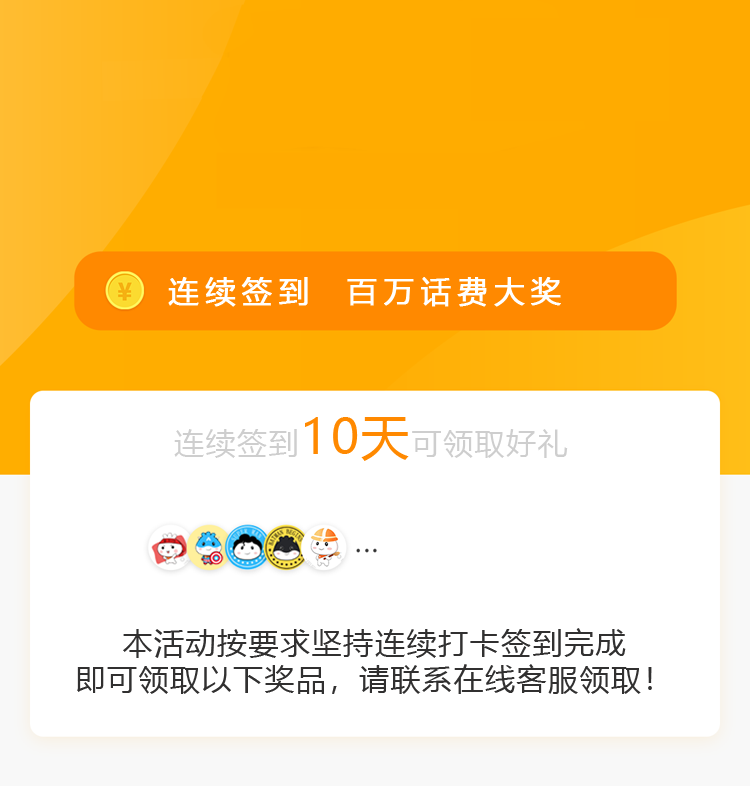
<style>
.page{position:relative;width:750px;height:786px;background:#ffffff}
.page>*{position:absolute;margin:0}
.t1{font:30px "MicrosoftYaHei";letter-spacing:0.2em;color:#ffffff;font-weight:bold}
.t2{font:30px "MicrosoftYaHei";letter-spacing:0.05em;color:#cecece}
.t3{font:48px "MicrosoftYaHei";letter-spacing:0.05em;color:#ff8900}
.t4{font:30px/36px "MicrosoftYaHei";letter-spacing:0.05em;color:#313030}
</style>
<div class="page">
<p class="t1" style="left:168px;top:277px;width:393px;height:30px">连续签到  百万话费大奖</p>
<p class="t2" style="left:174px;top:417px;width:394px;height:44px">连续签到<span class="t3">10天</span>可领取好礼</p>
<p class="t4" style="left:77px;top:628px;width:575px;height:66px;text-align:center">本活动按要求坚持连续打卡签到完成<br>即可领取以下奖品，请联系在线客服领取！</p>
</div>
